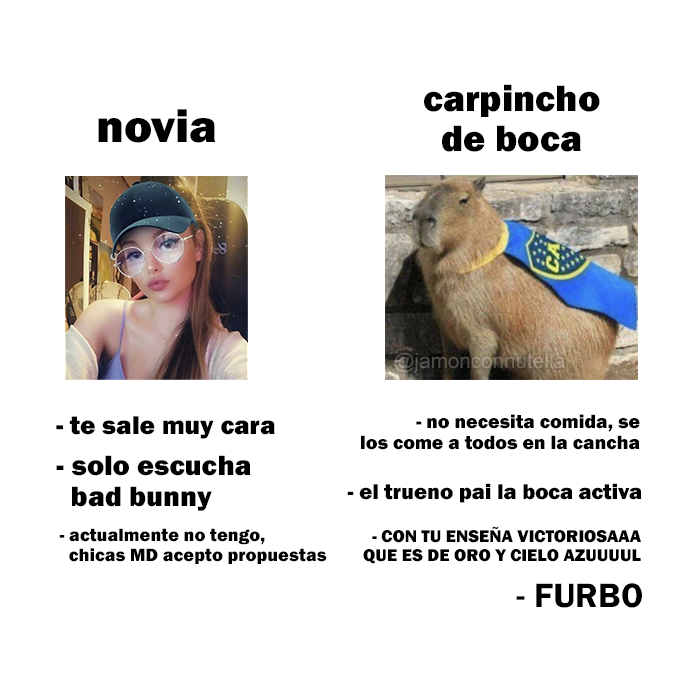
<style>
.page{position:relative;width:700px;height:700px;background:#ffffff}
.page>*{position:absolute;margin:0}
.t1{font:37.9px "FranklinGothic-Heavy";color:#000000}
.t2{font:47.6px "FranklinGothic-Heavy";color:#000000}
.t3{font:20.7px "ArialMT"}
.t4{font:19.7px "FranklinGothic-Heavy";color:#000000}
.t5{font:26.5px "FranklinGothic-Heavy";color:#000000}
.t6{font:29px "FranklinGothic-Heavy";color:#000000}
.t7{font:22.2px "FranklinGothic-Heavy";color:#000000}
.t8{font:18.5px "FranklinGothic-Heavy";color:#000000}
.t9{font:17.8px "FranklinGothic-Heavy";color:#000000}
.t10{font:34.7px "FranklinGothic-Demi";color:#000000}
</style>
<div class="page">
<p class="t1" style="left:424px;top:84px;width:176px;height:68px;text-align:center">carpincho<br>de boca</p>
<p class="t2" style="left:98px;top:109px;width:118px;height:34px">novia</p>
<p class="t3" style="left:394px;top:352px;width:171px;height:21px">@jamonconnutella</p>
<p class="t4" style="left:361px;top:414px;width:279px;height:36px;text-align:right">- no necesita comida, se<br>los come a todos en la cancha</p>
<p class="t5" style="left:56px;top:416px;width:219px;height:23px">- te sale muy cara</p>
<p class="t6" style="left:56px;top:455px;width:195px;height:56px">- solo escucha<br>  bad bunny</p>
<p class="t7" style="left:347px;top:483px;width:295px;height:20px">- el trueno pai la boca activa</p>
<p class="t8" style="left:59px;top:528px;width:268px;height:36px">- actualmente no tengo,<br>  chicas MD acepto propuestas</p>
<p class="t9" style="left:363px;top:526px;width:278px;height:38px;text-align:right">- CON TU ENSEÑA VICTORIOSAAA<br>QUE ES DE ORO Y CIELO AZUUUUL</p>
<p class="t10" style="left:516px;top:583px;width:126px;height:25px">- FURBO</p>
</div>
